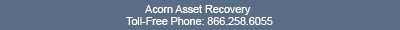
<style>
.page{position:relative;width:400px;height:30px;background:#596d86}
.page>*{position:absolute;margin:0}
.t1{font:10.7px "ArialMT";color:#ffffff}
</style>
<div class="page">
<p class="t1" style="left:145px;top:5px;width:106px;height:10px">Acorn Asset Recovery</p>
<p class="t1" style="left:126px;top:17px;width:147px;height:8px">Toll-Free Phone: 866.258.6055</p>
</div>
